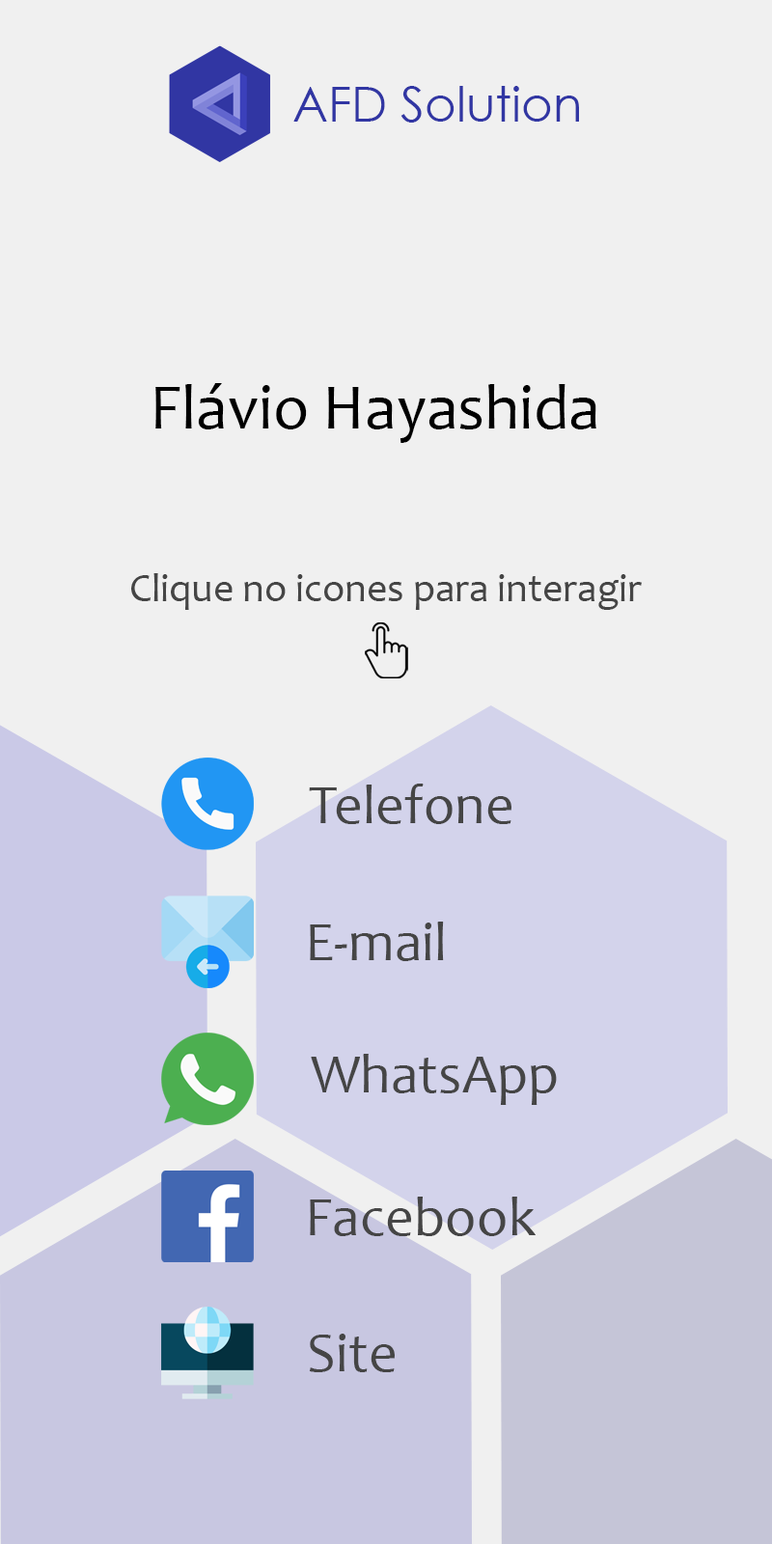
<style>
.page{position:relative;width:772px;height:1544px;background:#f0f0f0}
.page>*{position:absolute;margin:0}
.t1{font:48.3px "CenturyGothic";color:#3136a3}
.t2{font:64.3px "Candara";color:#000000}
.t3{font:40.2px "Candara";color:#454545}
.t4{font:56.3px "Candara";color:#454545}
</style>
<div class="page">
<p class="t1" style="left:293px;top:86px;width:286px;height:37px">AFD Solution</p>
<p class="t2" style="left:155px;top:383px;width:441px;height:60px">Flávio Hayashida</p>
<p class="t3" style="left:131px;top:573px;width:511px;height:37px">Clique no icones para interagir</p>
<p class="t4" style="left:309px;top:784px;width:203px;height:40px">Telefone</p>
<p class="t4" style="left:310px;top:922px;width:134px;height:39px">E-mail</p>
<p class="t4" style="left:311px;top:1054px;width:246px;height:51px">WhatsApp</p>
<p class="t4" style="left:310px;top:1197px;width:226px;height:39px">Facebook</p>
<p class="t4" style="left:309px;top:1334px;width:86px;height:38px">Site</p>
</div>
